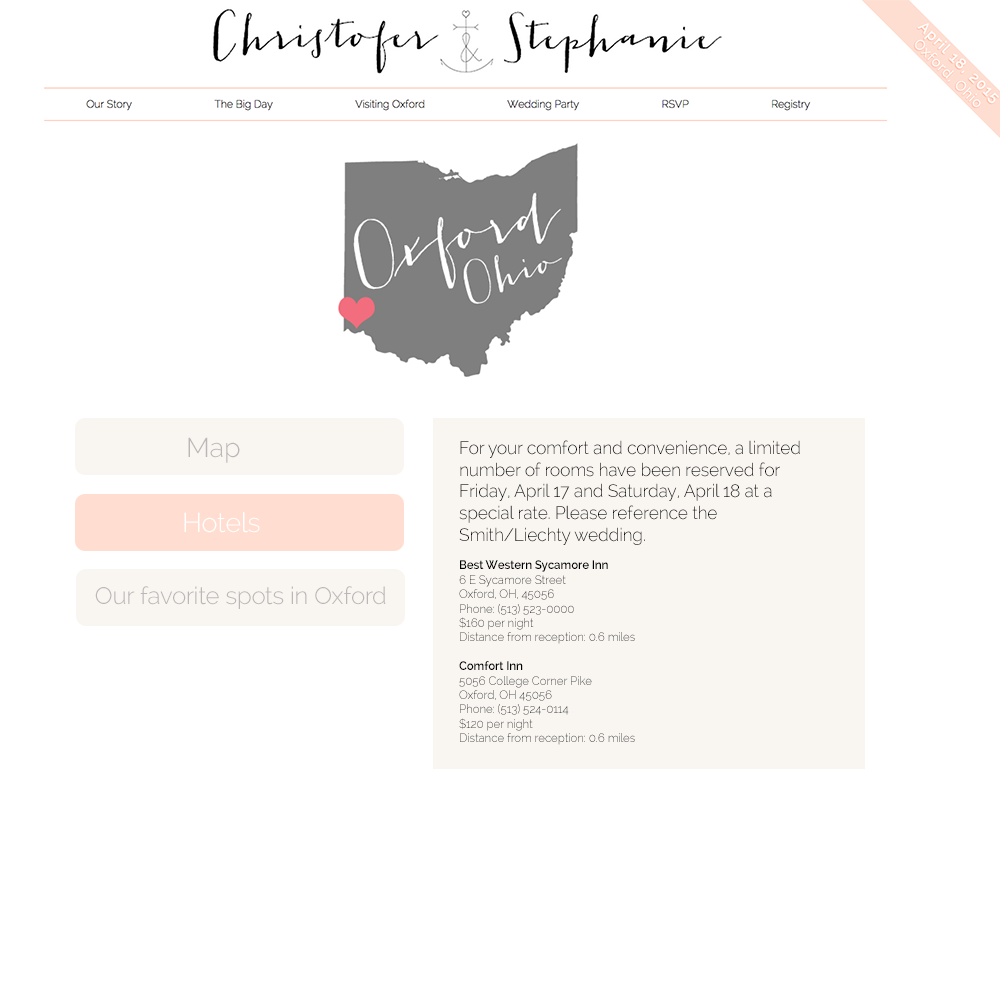
<style>
.page{position:relative;width:1000px;height:1000px;background:#ffffff}
.page>*{position:absolute;margin:0}
.t1{font:27px "Raleway-Light";letter-spacing:-0.01em;color:#bab7b7}
.t2{font:18px "Raleway-Light";letter-spacing:-0.01em;color:#000000;scale:0.97 1}
.t3{font:12px "Raleway-SemiBold";letter-spacing:-0.01em;color:#000000;scale:0.97 1}
.t4{font:12px "Raleway-Light";letter-spacing:-0.01em;color:#000000;scale:0.97 1}
.t5{font:27px "Raleway-Light";letter-spacing:-0.01em;color:#ffffff}
.t6{font:24px "Raleway-Light";letter-spacing:-0.01em;color:#bab7b7}
</style>
<div class="page">
<p class="t1" style="left:188px;top:437px;width:52px;height:26px">Map</p>
<p class="t2" style="left:459px;top:440px;width:341px;height:305px">For your comfort and convenience, a limited number of rooms have been reserved for Friday, April 17 and Saturday, April 18 at a <br>special rate. Please reference the Smith/Liechty wedding.<br><br><span class="t3">Best Western Sycamore Inn<br></span><span class="t4">6 E Sycamore Street<br>Oxford, OH, 45056<br>Phone: (513) 523-0000<br>$160 per night<br>Distance from reception: 0.6 miles<br><br></span><span class="t3">Comfort Inn<br></span><span class="t4">5056 College Corner Pike<br>Oxford, OH 45056<br>Phone: (513) 524-0114<br>$120 per night<br>Distance from reception: 0.6 miles</span></p>
<p class="t5" style="left:184px;top:512px;width:76px;height:21px">Hotels</p>
<p class="t6" style="left:95px;top:586px;width:291px;height:23px">Our favorite spots in Oxford</p>
</div>
